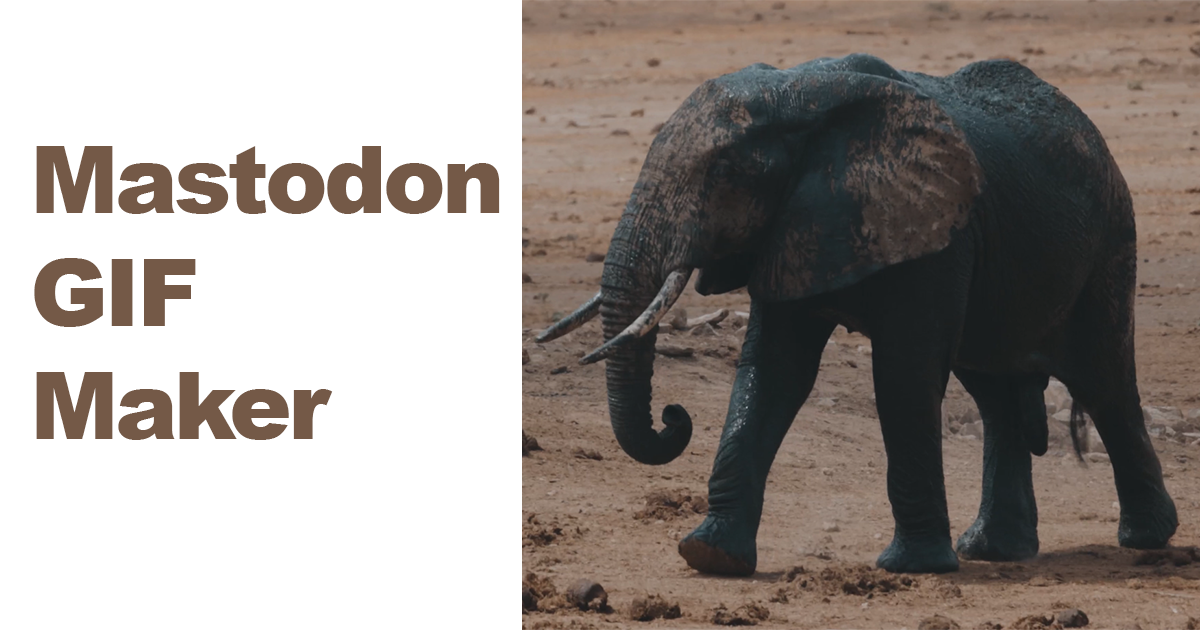
<style>
.page{position:relative;width:1200px;height:630px;background:#ffffff}
.page>*{position:absolute;margin:0}
.t1{font:94px "Arial-Black";letter-spacing:-0.04em;color:#745947}
</style>
<div class="page">
<p class="t1" style="left:34px;top:146px;width:466px;height:294px">Mastodon<br>GIF<br>Maker</p>
</div>
